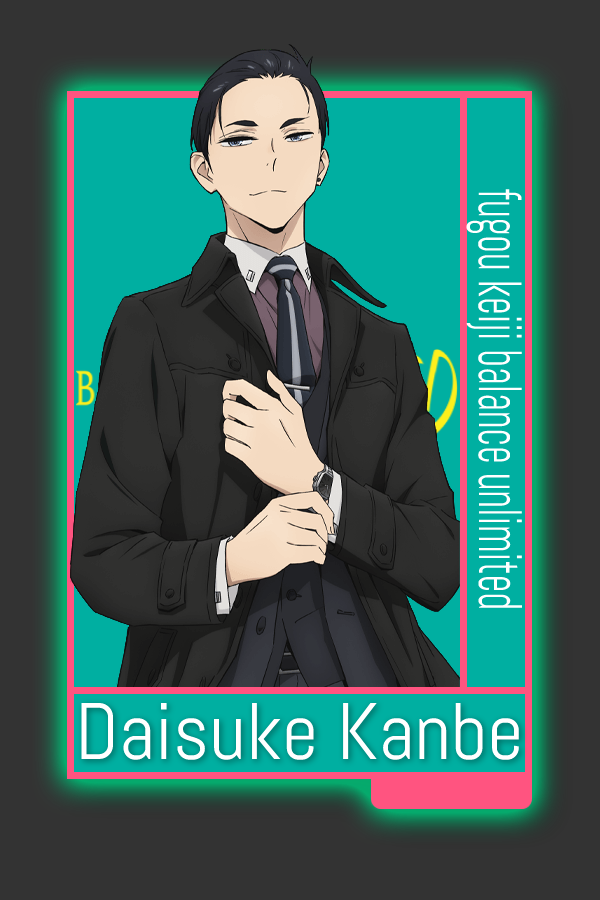
<style>
.page{position:relative;width:600px;height:900px;background:#333333}
.page>*{position:absolute;margin:0}
.t1{font:61.1px "Abel-Regular";color:#ffffff;scale:0.64 1}
.t2{font:80px "Abel-Regular";color:#ffffff}
</style>
<div class="page">
<p class="t1" style="left:466px;top:189px;width:56px;height:419px;rotate:90deg">fugou keiji balance unlimited</p>
<p class="t2" style="left:81px;top:702px;width:438px;height:58px">Daisuke Kanbe</p>
</div>
